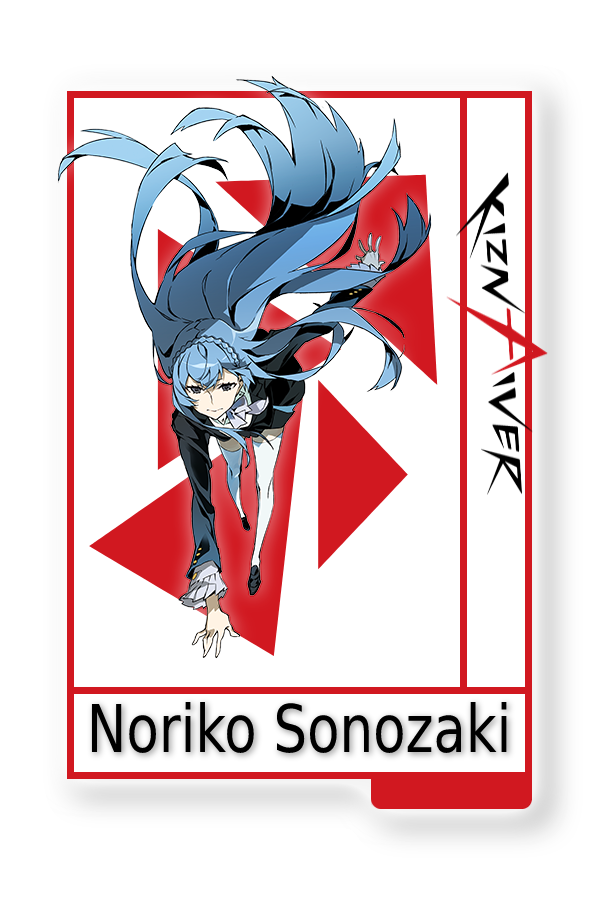
<style>
.page{position:relative;width:600px;height:900px;background:#ffffff}
.page>*{position:absolute;margin:0}
.t1{font:65.8px "CoolveticaRg-Regular";color:#000000;scale:0.81 1}
</style>
<div class="page">
<p class="t1" style="left:91px;top:702px;width:416px;height:51px">Noriko Sonozaki</p>
</div>
